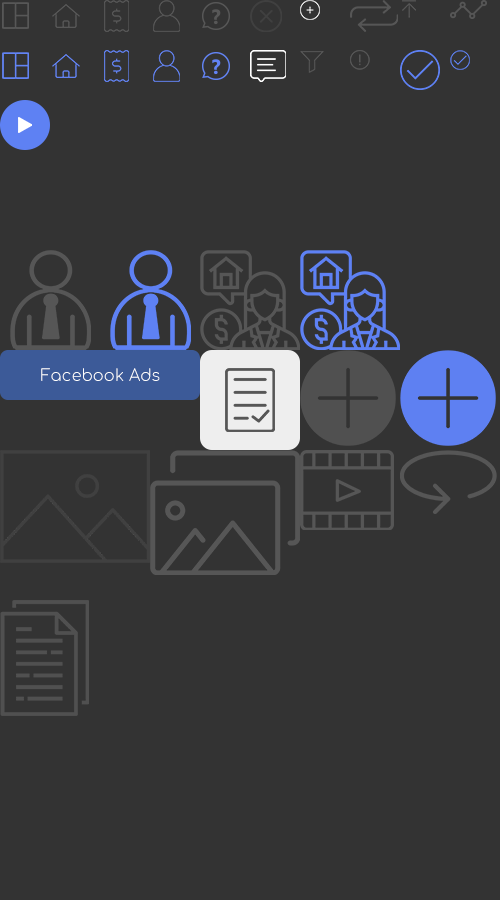
<style>
.page{position:relative;width:500px;height:900px;background:#333333}
.page>*{position:absolute;margin:0}
.t1{font:16px "Comfortaa-Light";color:#ffffff}
</style>
<div class="page">
<p class="t1" style="left:41px;top:368px;width:119px;height:13px">Facebook Ads</p>
</div>
